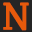
<style>
.page{position:relative;width:32px;height:32px;background:#252525}
.page>*{position:absolute;margin:0}
.t1{font:36px "LucidaFax";color:#e7590b;font-weight:bold}
</style>
<div class="page">
<p class="t1" style="left:3px;top:2px;width:26px;height:29px">N</p>
</div>
